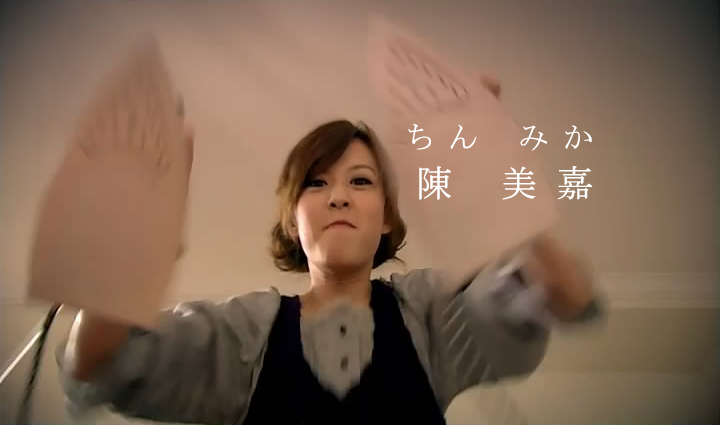
<style>
.page{position:relative;width:720px;height:425px}
.page>*{position:absolute;margin:0}
.t1{font:30px "MS-PMincho";letter-spacing:0.5em;color:#ffffff;font-weight:bold}
.t2{font:36px "MS-PMincho";letter-spacing:0.5em;color:#ffffff;font-weight:bold}
</style>
<div class="page">
<p class="t1" style="left:408px;top:124px;width:184px;height:27px">ちん みか</p>
<p class="t2" style="left:419px;top:166px;width:174px;height:34px">陳 美嘉</p>
</div>
